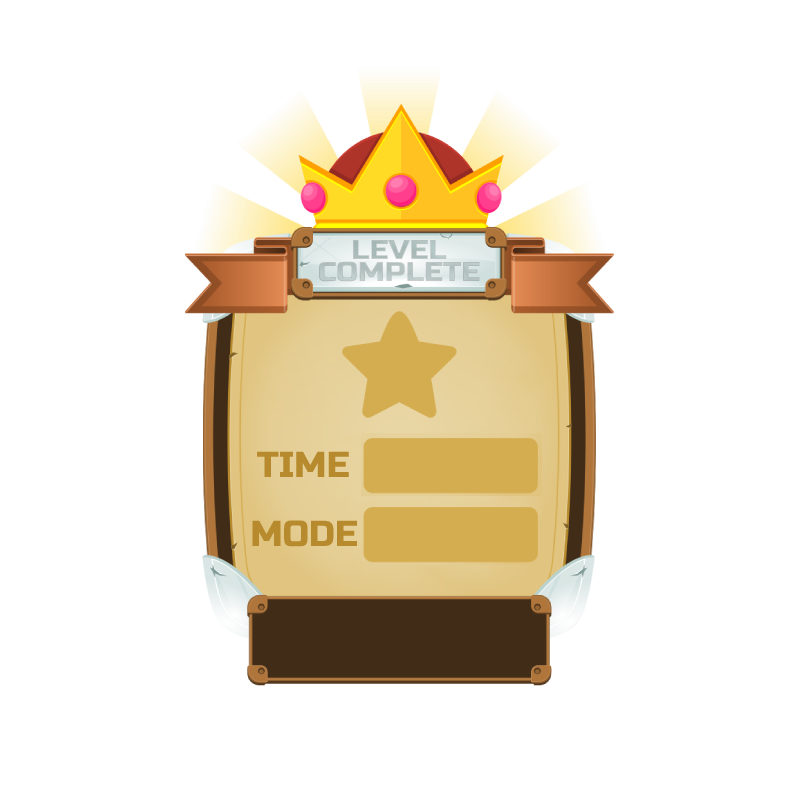
<style>
.page{position:relative;width:800px;height:800px;background:#ffffff}
.page>*{position:absolute;margin:0}
.t1{font:27px/22px "RussoOne-Regular";color:#b5c2c1;scale:1.1 1}
.t2{font:36px "RussoOne-Regular";color:#b78b2d}
</style>
<div class="page">
<p class="t1" style="left:319px;top:240px;width:161px;height:42px;text-align:center">LEVEL<br>COMPLETE</p>
<p class="t2" style="left:257px;top:451px;width:92px;height:26px">TIME</p>
<p class="t2" style="left:252px;top:520px;width:106px;height:27px">MODE</p>
</div>
